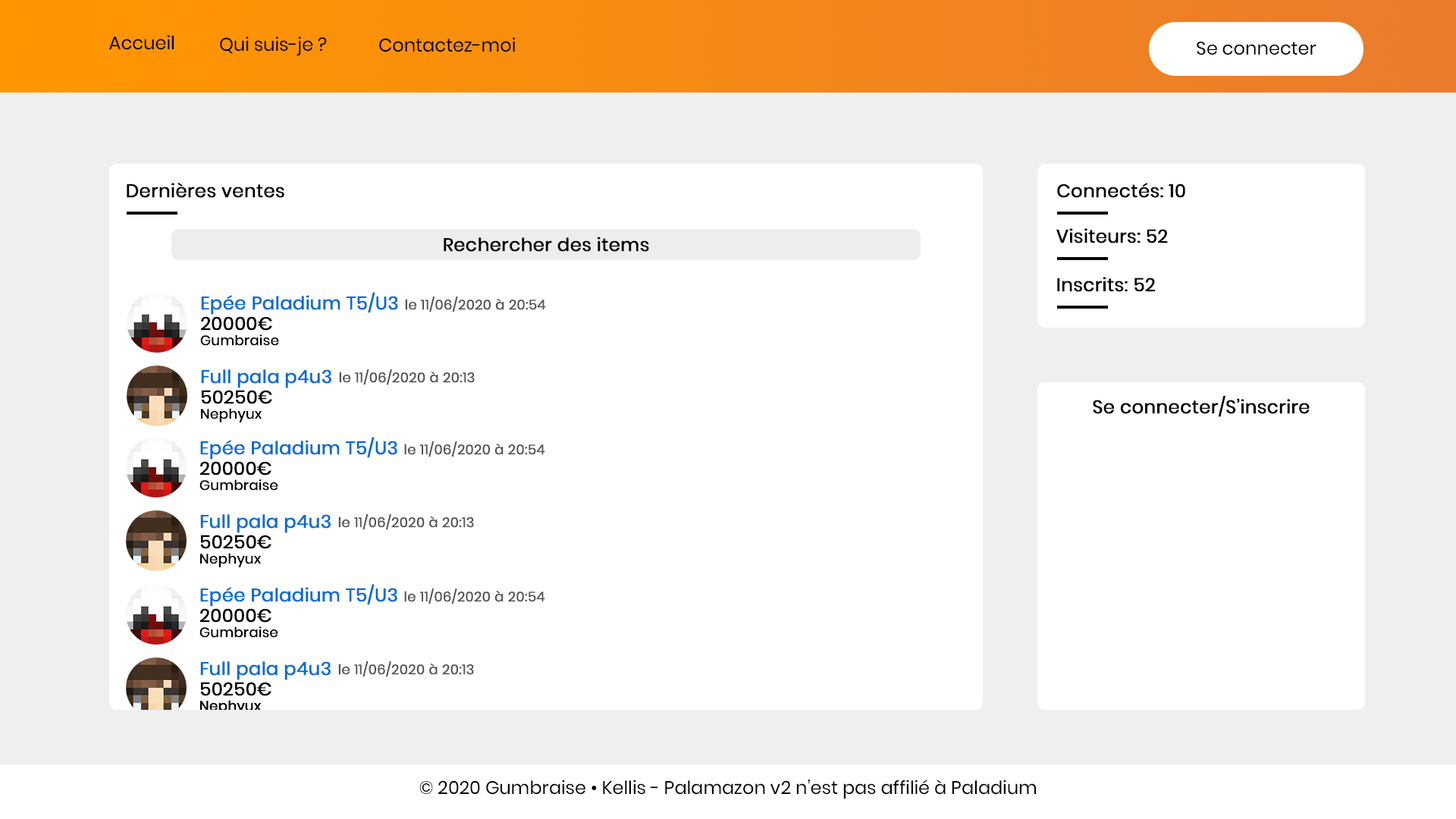
<style>
.page{position:relative;width:1456px;height:819px;background:#ffffff}
.page>*{position:absolute;margin:0}
.t1{font:18.4px "Poppins-Regular";color:#000000}
.t2{font:18.2px "Poppins-Regular";color:#000000}
.t3{font:18.5px "Poppins-Regular";color:#000000;font-weight:bold}
.t4{font:18.2px "Poppins-Regular";color:#000000;font-weight:bold}
.t5{font:18.2px "Poppins-Regular";color:#006bd9;font-weight:bold}
.t6{font:13.6px "Poppins-Regular";color:#545454;font-weight:bold}
.t7{font:13.6px "Poppins-Regular";color:#000000;font-weight:bold}
</style>
<div class="page">
<p class="t1" style="left:109px;top:35px;width:65px;height:15px">Accueil</p>
<p class="t1" style="left:220px;top:36px;width:107px;height:20px">Qui suis-je ?</p>
<p class="t1" style="left:379px;top:37px;width:136px;height:15px">Contactez-moi</p>
<p class="t2" style="left:1197px;top:41px;width:119px;height:14px">Se connecter</p>
<p class="t3" style="left:127px;top:183px;width:157px;height:15px">Dernières ventes</p>
<p class="t4" style="left:1057px;top:183px;width:128px;height:15px">Connectés: 10</p>
<p class="t3" style="left:1056px;top:228px;width:112px;height:15px">Visiteurs: 52</p>
<p class="t4" style="left:444px;top:237px;width:205px;height:15px">Rechercher des items</p>
<p class="t3" style="left:1057px;top:277px;width:98px;height:15px">Inscrits: 52</p>
<p class="t5" style="left:201px;top:292px;width:197px;height:23px">Epée Paladium T5/U3</p>
<p class="t6" style="left:405px;top:297px;width:141px;height:15px">le 11/06/2020 à 20:54</p>
<p class="t4" style="left:201px;top:316px;width:71px;height:15px">20000€</p>
<p class="t7" style="left:200px;top:334px;width:79px;height:12px">Gumbraise</p>
<p class="t5" style="left:201px;top:369px;width:130px;height:19px">Full pala p4u3</p>
<p class="t6" style="left:339px;top:369px;width:136px;height:16px">le 11/06/2020 à 20:13</p>
<p class="t4" style="left:202px;top:390px;width:70px;height:14px">50250€</p>
<p class="t3" style="left:1093px;top:396px;width:217px;height:21px">Se connecter/S’inscrire</p>
<p class="t7" style="left:201px;top:408px;width:61px;height:14px">Nephyux</p>
<p class="t5" style="left:200px;top:437px;width:197px;height:23px">Epée Paladium T5/U3</p>
<p class="t6" style="left:404px;top:441px;width:141px;height:16px">le 11/06/2020 à 20:54</p>
<p class="t4" style="left:199px;top:461px;width:72px;height:14px">20000€</p>
<p class="t7" style="left:199px;top:479px;width:79px;height:12px">Gumbraise</p>
<p class="t5" style="left:200px;top:514px;width:131px;height:19px">Full pala p4u3</p>
<p class="t6" style="left:338px;top:514px;width:136px;height:16px">le 11/06/2020 à 20:13</p>
<p class="t4" style="left:201px;top:535px;width:70px;height:14px">50250€</p>
<p class="t7" style="left:200px;top:553px;width:61px;height:14px">Nephyux</p>
<p class="t5" style="left:200px;top:584px;width:197px;height:23px">Epée Paladium T5/U3</p>
<p class="t6" style="left:404px;top:588px;width:141px;height:16px">le 11/06/2020 à 20:54</p>
<p class="t4" style="left:199px;top:608px;width:72px;height:15px">20000€</p>
<p class="t7" style="left:199px;top:626px;width:79px;height:12px">Gumbraise</p>
<p class="t5" style="left:200px;top:661px;width:131px;height:19px">Full pala p4u3</p>
<p class="t6" style="left:338px;top:661px;width:136px;height:16px">le 11/06/2020 à 20:13</p>
<p class="t4" style="left:201px;top:682px;width:70px;height:14px">50250€</p>
<p class="t2" style="left:419px;top:780px;width:617px;height:19px">© 2020 Gumbraise • Kellis - Palamazon v2 n’est pas affilié à Paladium</p>
</div>
